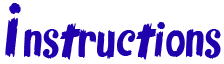
<style>
.page{position:relative;width:224px;height:64px;background:#ffffff}
.page>*{position:absolute;margin:0}
.t1{font:100px "FantasticFont";color:#2100ad}
</style>
<div class="page">
<p class="t1" style="left:5px;top:3px;width:216px;height:57px">Instructions</p>
</div>
